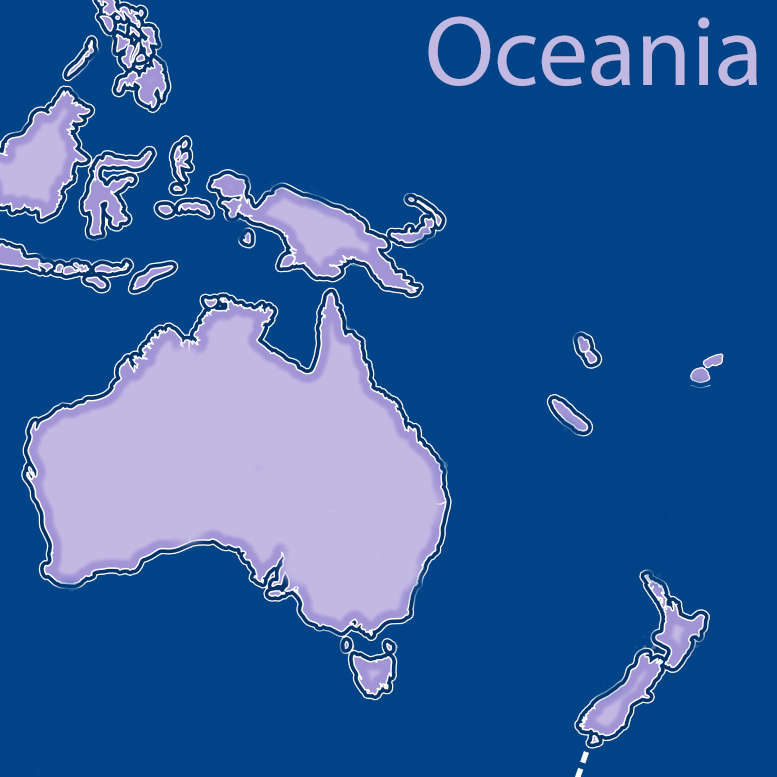
<style>
.page{position:relative;width:777px;height:777px;background:#004386}
.page>*{position:absolute;margin:0}
.t1{font:100px "KozGoPr6N-Regular";color:#c2b9e3}
</style>
<div class="page">
<p class="t1" style="left:428px;top:16px;width:329px;height:70px">Oceania</p>
</div>
